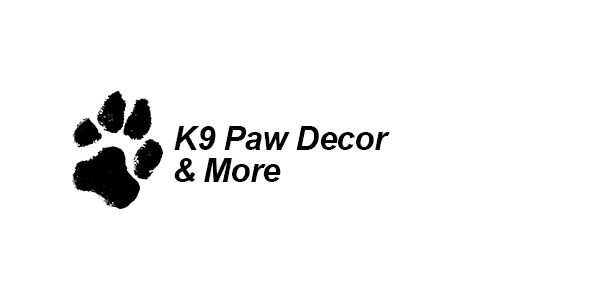
<style>
.page{position:relative;width:600px;height:300px;background:#ffffff}
.page>*{position:absolute;margin:0}
.t1{font:33.3px "Arial-BoldItalicMT";letter-spacing:-0.025em;color:#000000}
</style>
<div class="page">
<p class="t1" style="left:174px;top:126px;width:216px;height:24px">K9 Paw Decor</p>
<p class="t1" style="left:174px;top:158px;width:107px;height:24px">&amp; More</p>
</div>
